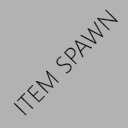
<style>
.page{position:relative;width:128px;height:128px;background:#b2b2b2}
.page>*{position:absolute;margin:0}
.t1{font:24.2px "SegoeUI-Light";letter-spacing:0.02em;color:#0e0e0e}
</style>
<div class="page">
<p class="t1" style="left:13px;top:9px;width:105px;height:107px;rotate:-46deg">ITEM SPAWN</p>
</div>
